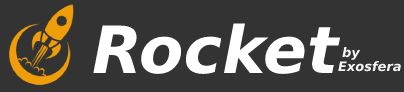
<style>
.page{position:relative;width:404px;height:92px;background:#333333}
.page>*{position:absolute;margin:0}
.t1{font:65px "DejaVuSans-BoldOblique";color:#ffffff}
.t2{font:13px "DejaVuSans-BoldOblique";color:#f4f6f7}
</style>
<div class="page">
<p class="t1" style="left:93px;top:23px;width:248px;height:51px">Rocket</p>
<p class="t2" style="left:342px;top:47px;width:19px;height:13px">by</p>
<p class="t2" style="left:338px;top:61px;width:63px;height:11px">Exosfera</p>
</div>
